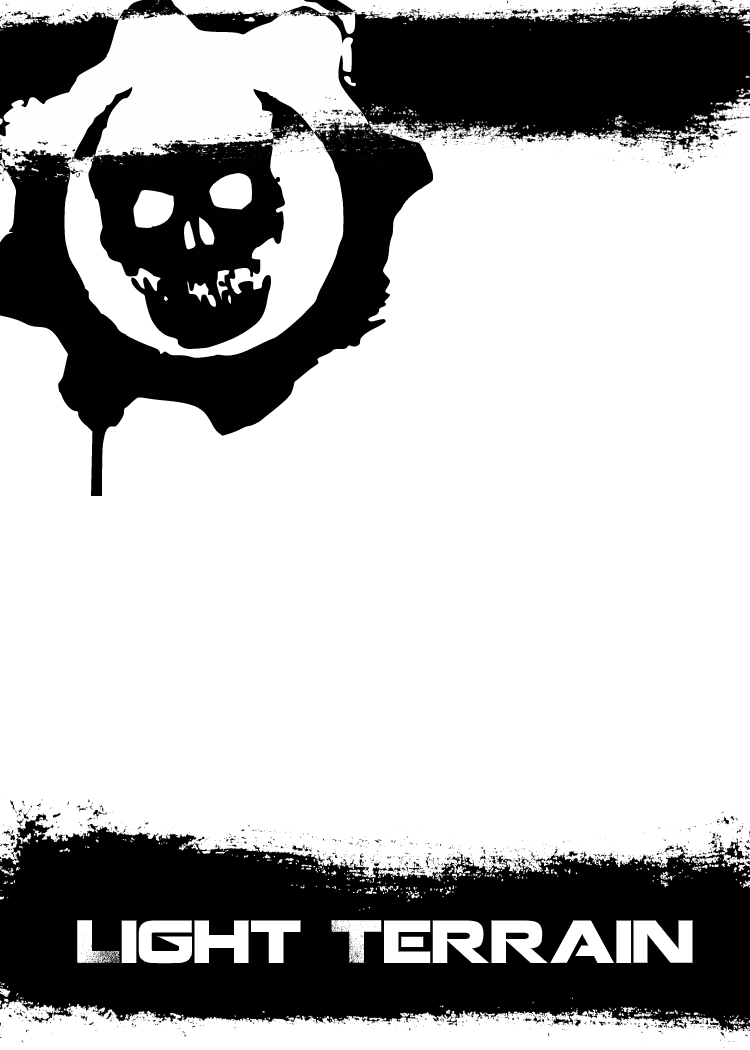
<style>
.page{position:relative;width:750px;height:1050px;background:#ffffff}
.page>*{position:absolute;margin:0}
.t1{font:60px "Coalition";color:#ffffff}
</style>
<div class="page">
<p class="t1" style="left:77px;top:920px;width:616px;height:44px">Light Terrain</p>
</div>
